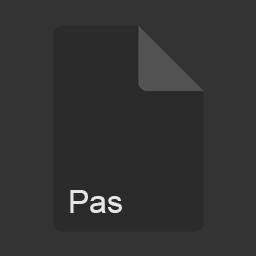
<style>
.page{position:relative;width:256px;height:256px;background:#333333}
.page>*{position:absolute;margin:0}
.t1{font:32px "ArialMT";color:#e6e6e6}
</style>
<div class="page">
<p class="t1" style="left:70px;top:190px;width:52px;height:23px">Pas</p>
</div>
